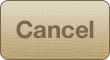
<style>
.page{position:relative;width:110px;height:60px}
.page>*{position:absolute;margin:0}
.t1{font:24px "HelveticaNeue-Bold";color:#7c684c}
</style>
<div class="page">
<p class="t1" style="left:16px;top:20px;width:78px;height:19px">Cancel</p>
</div>
